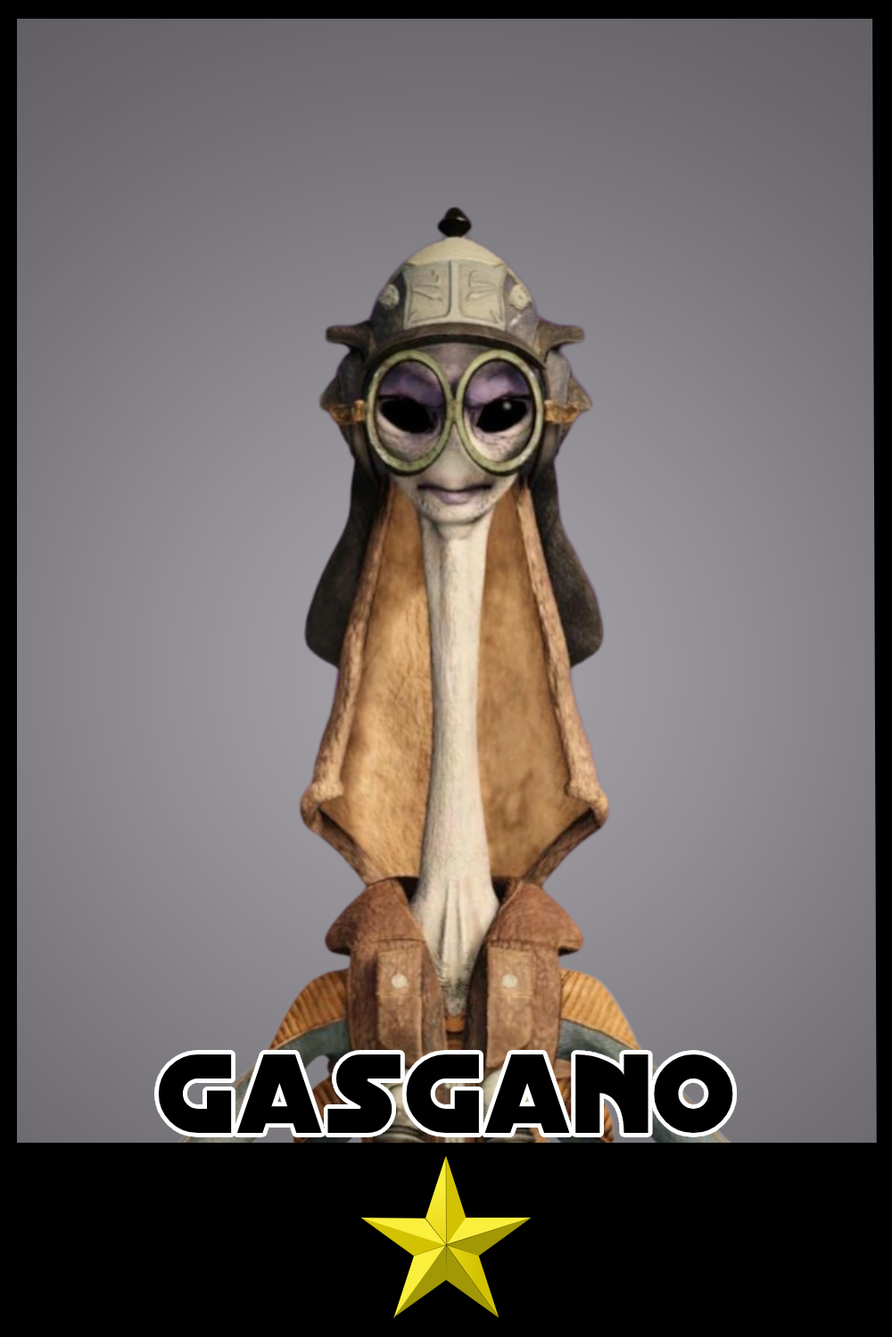
<style>
.page{position:relative;width:892px;height:1337px}
.page>*{position:absolute;margin:0}
.t1{font:120.8px "DistantGalaxy";color:#000000}
</style>
<div class="page">
<p class="t1" style="left:158px;top:1055px;width:575px;height:78px">gasgano</p>
</div>
